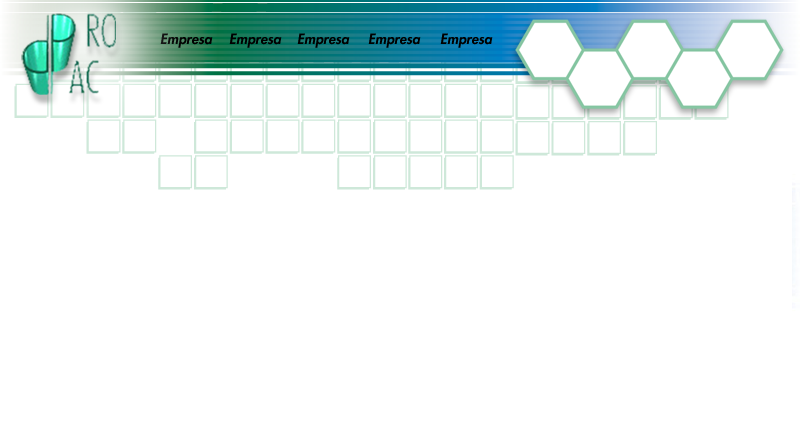
<style>
.page{position:relative;width:800px;height:437px;background:#ffffff}
.page>*{position:absolute;margin:0}
.t1{font:14px "Futura-HeavyOblique";letter-spacing:0.002em;color:#000000}
</style>
<div class="page">
<p class="t1" style="left:160px;top:33px;width:53px;height:15px">Empresa</p>
<p class="t1" style="left:229px;top:33px;width:53px;height:15px">Empresa</p>
<p class="t1" style="left:297px;top:33px;width:53px;height:15px">Empresa</p>
<p class="t1" style="left:368px;top:33px;width:53px;height:15px">Empresa</p>
<p class="t1" style="left:440px;top:33px;width:53px;height:15px">Empresa</p>
</div>
